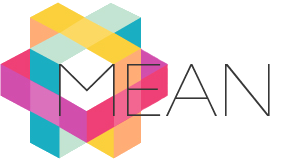
<style>
.page{position:relative;width:300px;height:160px;background:#ffffff}
.page>*{position:absolute;margin:0}
.t1{font:70px "SlimJoe";color:#373737}
</style>
<div class="page">
<p class="t1" style="left:59px;top:64px;width:211px;height:52px">mean</p>
</div>
